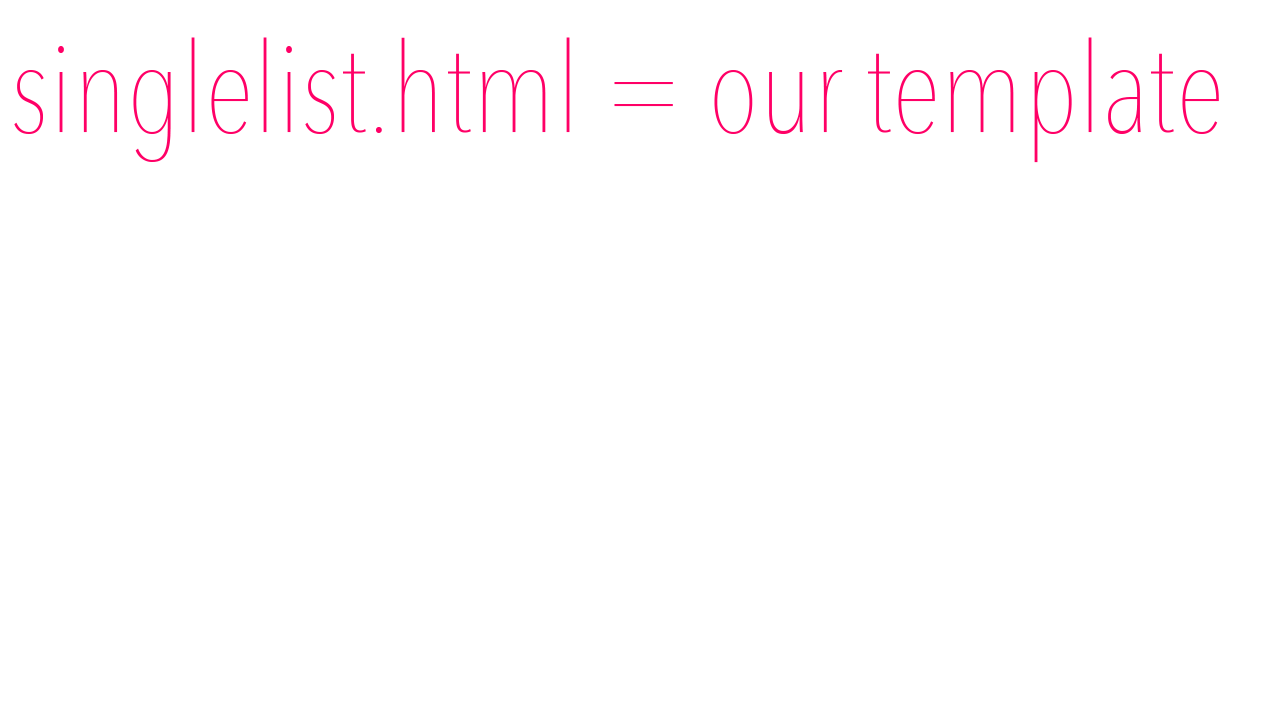
<style>
.page{position:relative;width:1280px;height:720px;background:#ffffff}
.page>*{position:absolute;margin:0}
.t1{font:125px "AvenirNextCondensed-UltraLight";color:#ff0066}
</style>
<div class="page">
<p class="t1" style="left:14px;top:37px;width:1205px;height:126px">singlelist.html = our template</p>
</div>
